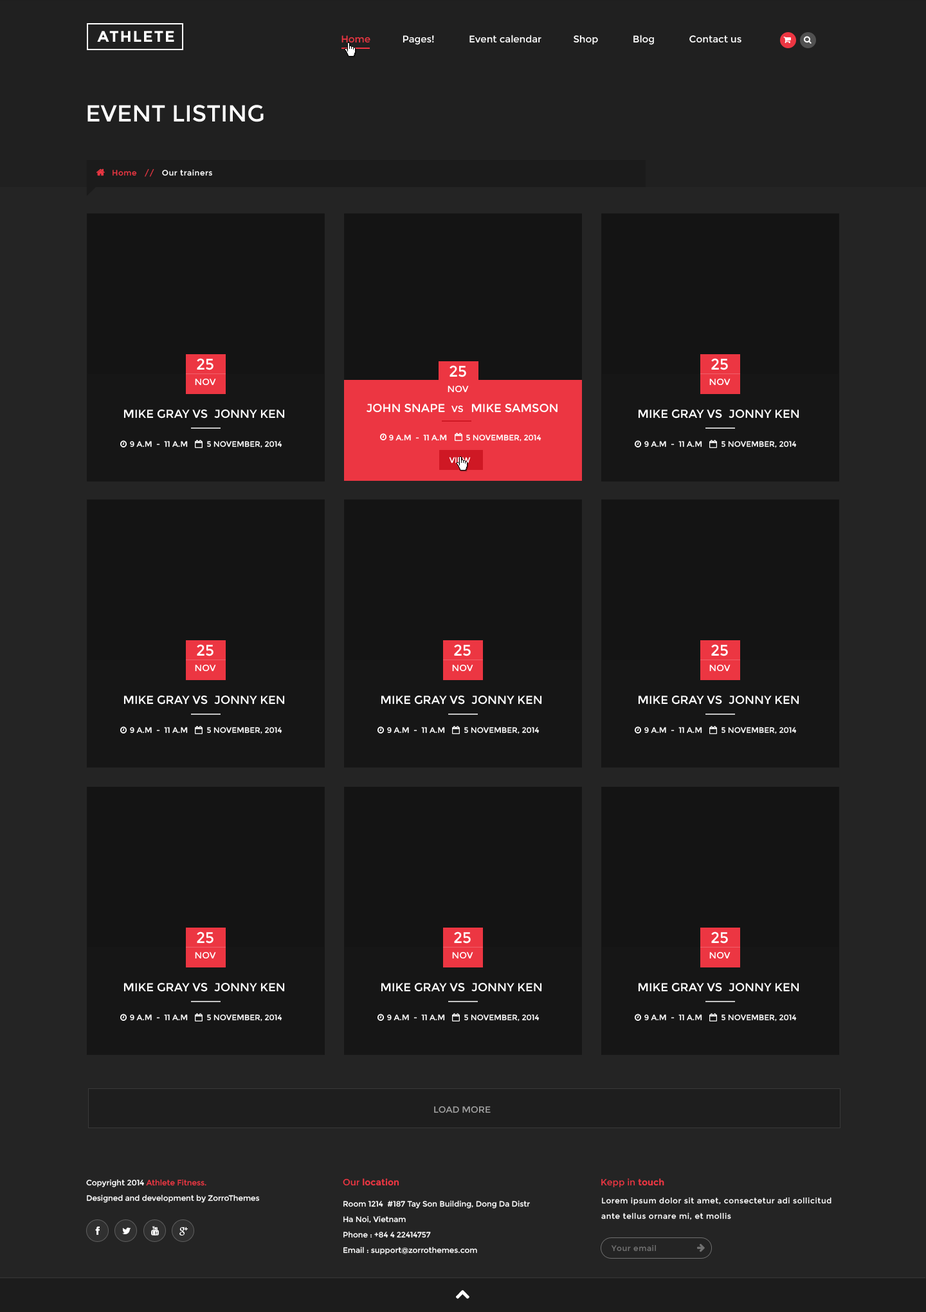
<style>
.page{position:relative;width:926px;height:1312px;background:#242424}
.page>*{position:absolute;margin:0}
.t1{font:15.4px "Montserrat-Bold";letter-spacing:0.075em;color:#ffffff;text-transform:uppercase}
.t2{font:9.6px "Montserrat-Regular";color:#ffffff}
.t3{font:9.6px "Montserrat-Regular";color:#ec3642}
.t4{font:23.1px "Montserrat-Regular";color:#ffffff;text-transform:uppercase}
.t5{font:7.7px "Montserrat-Regular";letter-spacing:0.05em;color:#ffffff}
.t6{font:7.7px "Montserrat-Regular";letter-spacing:0.05em;color:#ec3642}
.t7{font:9px/15.4px "Montserrat-Regular";color:#ffffff;text-transform:uppercase}
.t8{font:15.4px/15.4px "Montserrat-Regular";color:#ffffff;text-transform:uppercase}
.t9{font:11.6px "Montserrat-Regular";color:#ffffff;text-transform:uppercase}
.t10{font:9px "Montserrat-Regular";color:#ffffff;text-transform:uppercase}
.t11{font:7.7px "Montserrat-Regular";color:#ffffff;text-transform:uppercase}
.t12{font:9px "Montserrat-Regular";color:#a0a0a0;text-transform:uppercase}
.t13{font:7.7px/15.4px "Montserrat-Regular";color:#ffffff}
.t14{font:7.7px/15.4px "Montserrat-Regular";color:#ec3642}
.t15{font:9px "Montserrat-Bold";color:#ec3642}
.t16{font:9px "Montserrat-Regular";color:#ec3642}
.t17{font:7.7px/15.4px "Montserrat-Regular";letter-spacing:0.05em;color:#ffffff}
.t18{font:7.7px "Montserrat-Regular";letter-spacing:0.05em;color:#717171}
</style>
<div class="page">
<p class="t1" style="left:97px;top:31px;width:77px;height:11px">Athlete</p>
<p class="t2" style="left:341px;top:35px;width:400px;height:10px"><span class="t3">Home  </span>          Pages!             Event calendar            Shop             Blog             Contact us</p>
<p class="t4" style="left:87px;top:105px;width:177px;height:17px">event listing</p>
<p class="t5" style="left:113px;top:169px;width:99px;height:8px"><span class="t6">Home   //   </span>Our trainers</p>
<p class="t7" style="left:195px;top:358px;width:21px;height:27px;text-align:center"><span class="t8">25<br></span>nov</p>
<p class="t7" style="left:447px;top:365px;width:22px;height:27px;text-align:center"><span class="t8">25<br></span>nov</p>
<p class="t7" style="left:709px;top:358px;width:21px;height:27px;text-align:center"><span class="t8">25<br></span>nov</p>
<p class="t9" style="left:123px;top:409px;width:162px;height:10px">mike gray vs  jonny ken</p>
<p class="t9" style="left:366px;top:404px;width:191px;height:9px">John Snape  <span class="t10">vs   </span>mike samson</p>
<p class="t9" style="left:638px;top:409px;width:161px;height:10px">mike gray vs  jonny ken</p>
<p class="t11" style="left:389px;top:435px;width:152px;height:7px">9 a.m  -  11 a.m         5 november, 2014</p>
<p class="t11" style="left:130px;top:441px;width:152px;height:7px">9 a.m  -  11 a.m         5 november, 2014</p>
<p class="t11" style="left:644px;top:441px;width:153px;height:7px">9 a.m  -  11 a.m         5 november, 2014</p>
<p class="t11" style="left:449px;top:457px;width:22px;height:7px">view</p>
<p class="t7" style="left:195px;top:644px;width:21px;height:27px;text-align:center"><span class="t8">25<br></span>nov</p>
<p class="t7" style="left:452px;top:644px;width:21px;height:27px;text-align:center"><span class="t8">25<br></span>nov</p>
<p class="t7" style="left:709px;top:644px;width:21px;height:27px;text-align:center"><span class="t8">25<br></span>nov</p>
<p class="t9" style="left:123px;top:695px;width:162px;height:10px">mike gray vs  jonny ken</p>
<p class="t9" style="left:381px;top:695px;width:161px;height:10px">mike gray vs  jonny ken</p>
<p class="t9" style="left:638px;top:695px;width:161px;height:10px">mike gray vs  jonny ken</p>
<p class="t11" style="left:130px;top:727px;width:152px;height:7px">9 a.m  -  11 a.m         5 november, 2014</p>
<p class="t11" style="left:387px;top:727px;width:152px;height:7px">9 a.m  -  11 a.m         5 november, 2014</p>
<p class="t11" style="left:644px;top:727px;width:153px;height:7px">9 a.m  -  11 a.m         5 november, 2014</p>
<p class="t7" style="left:195px;top:932px;width:21px;height:27px;text-align:center"><span class="t8">25<br></span>nov</p>
<p class="t7" style="left:452px;top:932px;width:21px;height:27px;text-align:center"><span class="t8">25<br></span>nov</p>
<p class="t7" style="left:709px;top:932px;width:21px;height:27px;text-align:center"><span class="t8">25<br></span>nov</p>
<p class="t9" style="left:123px;top:982px;width:162px;height:10px">mike gray vs  jonny ken</p>
<p class="t9" style="left:381px;top:982px;width:161px;height:10px">mike gray vs  jonny ken</p>
<p class="t9" style="left:638px;top:982px;width:161px;height:10px">mike gray vs  jonny ken</p>
<p class="t11" style="left:130px;top:1014px;width:152px;height:8px">9 a.m  -  11 a.m         5 november, 2014</p>
<p class="t11" style="left:387px;top:1014px;width:152px;height:8px">9 a.m  -  11 a.m         5 november, 2014</p>
<p class="t11" style="left:644px;top:1014px;width:153px;height:8px">9 a.m  -  11 a.m         5 november, 2014</p>
<p class="t12" style="left:434px;top:1106px;width:57px;height:7px">load more</p>
<p class="t13" style="left:86px;top:1179px;width:174px;height:24px">Copyright 2014 <span class="t14">Athlete Fitness. <br></span>Designed and development by ZorroThemes</p>
<p class="t15" style="left:343px;top:1178px;width:56px;height:8px"><span class="t16">Our </span>location</p>
<p class="t16" style="left:601px;top:1178px;width:63px;height:9px">Kepp in <span class="t15">touch</span></p>
<p class="t13" style="left:343px;top:1200px;width:187px;height:55px">Room 1214  #187 Tay Son Building, Dong Da Distr<br>Ha Noi, Vietnam<br>Phone : +84 4 22414757<br>Email : support@zorrothemes.com</p>
<p class="t17" style="left:601px;top:1197px;width:230px;height:23px">Lorem ipsum dolor sit amet, consectetur adi sollicitud ante tellus ornare mi, et mollis</p>
<p class="t18" style="left:611px;top:1245px;width:45px;height:7px">Your email</p>
</div>
